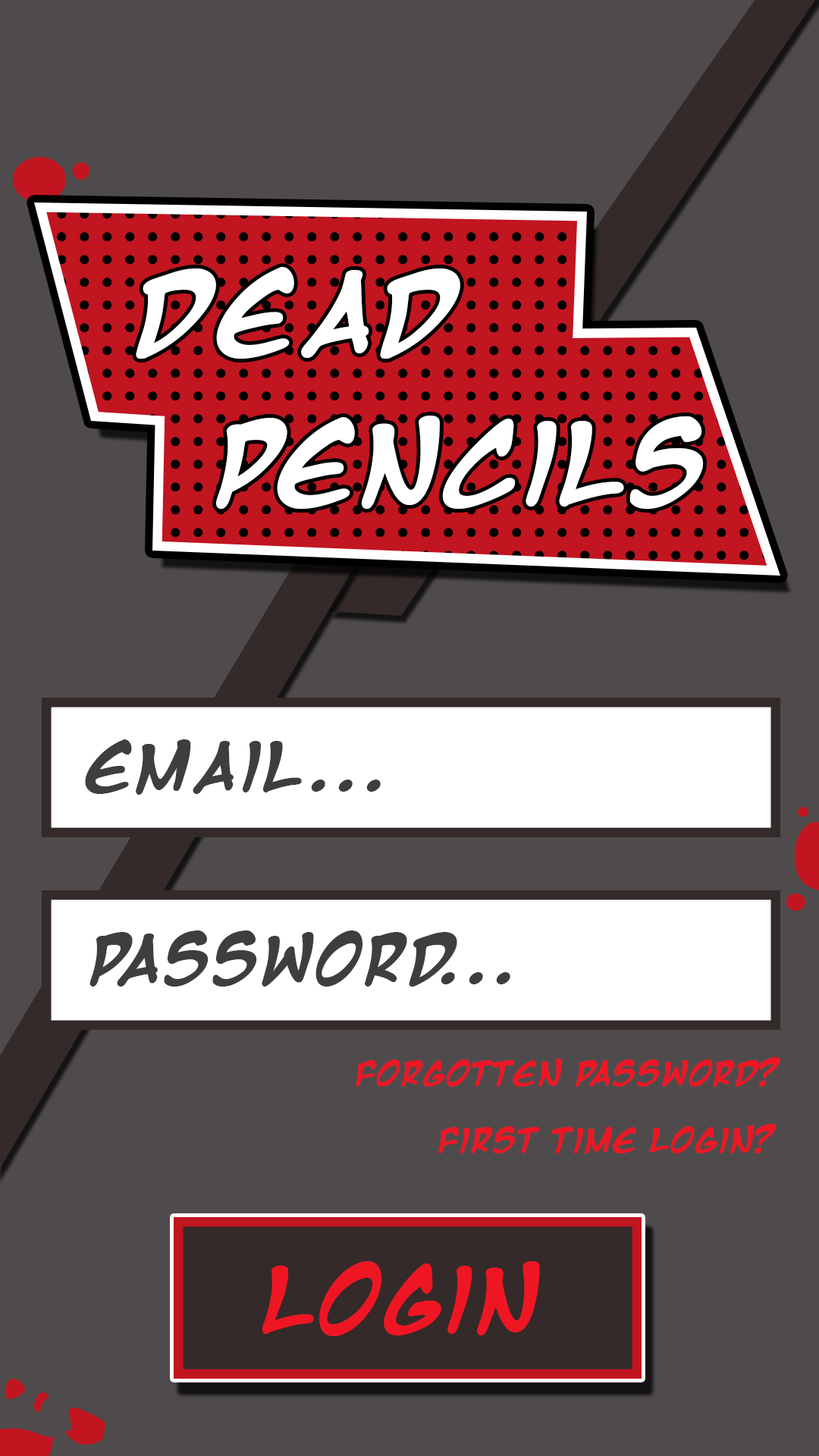
<style>
.page{position:relative;width:819px;height:1456px;background:#4f4b4c}
.page>*{position:absolute;margin:0}
.t1{font:94.8px "MangaTempleBold";color:#ffffff}
.t2{font:56.9px "MangaTempleBold";color:#3f3d3d}
.t3{font:28.4px "MangaTempleBold";color:#ef1624}
.t4{font:75.8px "MangaTempleBold";color:#ef1624}
</style>
<div class="page">
<p class="t1" style="left:136px;top:267px;width:324px;height:92px">Dead</p>
<p class="t1" style="left:215px;top:416px;width:489px;height:93px">Pencils</p>
<p class="t2" style="left:85px;top:739px;width:296px;height:56px">Email...</p>
<p class="t2" style="left:89px;top:930px;width:421px;height:57px">Password...</p>
<p class="t3" style="left:356px;top:1057px;width:424px;height:30px">Forgotten Password?</p>
<p class="t3" style="left:438px;top:1124px;width:338px;height:30px">First Time Login?</p>
<p class="t4" style="left:262px;top:1261px;width:278px;height:75px">Login</p>
</div>
